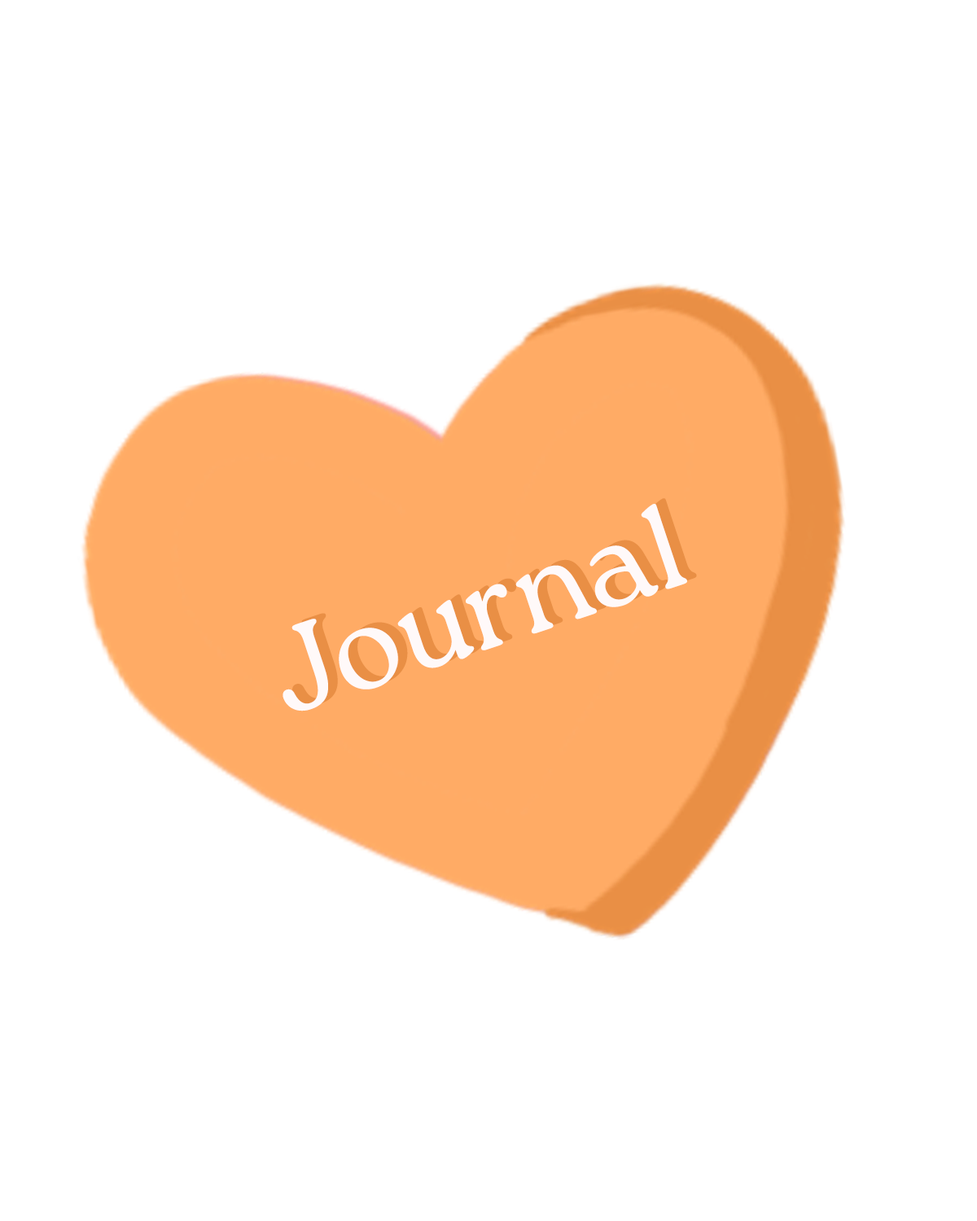
<style>
.page{position:relative;width:977px;height:1221px;background:#ffffff}
.page>*{position:absolute;margin:0}
.t1{font:120.1px "Roca-Light";color:#fff9f9}
.t2{font:120.1px "Roca-Light";color:#e98f45}
</style>
<div class="page">
<p class="t1" style="left:282px;top:504px;width:405px;height:207px;rotate:-18deg">Journal</p>
<p class="t2" style="left:292px;top:498px;width:405px;height:208px;rotate:-18deg">Journal</p>
</div>
